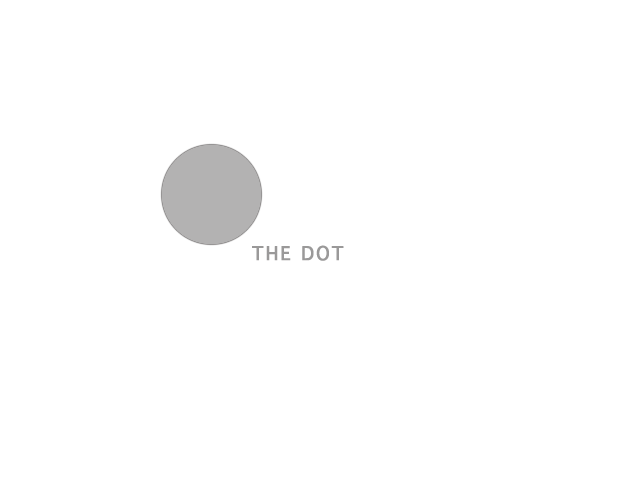
<style>
.page{position:relative;width:640px;height:480px;background:#ffffff}
.page>*{position:absolute;margin:0}
.t1{font:18px "Thonburi";letter-spacing:0.1em;color:#9a9999;font-weight:bold}
</style>
<div class="page">
<p class="t1" style="left:252px;top:245px;width:92px;height:16px">THE DOT</p>
</div>
